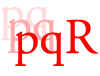
<style>
.page{position:relative;width:100px;height:76px;background:#ffffff}
.page>*{position:absolute;margin:0}
.t1{font:50px "AGaramondPro-Regular";color:#ff0000}
</style>
<div class="page">
<p class="t1" style="left:15px;top:19px;width:84px;height:47px">pqR</p>
</div>
